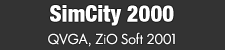
<style>
.page{position:relative;width:225px;height:50px;background:#333333}
.page>*{position:absolute;margin:0}
.t1{font:22.7px "HelveticaNeueLT-BlackCond";color:#ffffff}
.t2{font:13.3px "LuzSans-Book";color:#ffffff}
</style>
<div class="page">
<p class="t1" style="left:50px;top:5px;width:124px;height:21px">SimCity 2000</p>
<p class="t2" style="left:48px;top:32px;width:127px;height:15px">QVGA, ZiO Soft 2001</p>
</div>
